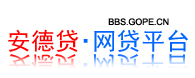
<style>
.page{position:relative;width:195px;height:78px;background:#ffffff}
.page>*{position:absolute;margin:0}
.t1{font:24px "SimHei";letter-spacing:0.02em;color:#0066ff}
.t2{font:24px "SimHei";letter-spacing:0.02em;color:#ff0000}
.t3{font:9px "ArialMT";letter-spacing:0.025em;color:#000000}
.t4{font:24px "SimHei";letter-spacing:0.02em}
</style>
<div class="page">
<p class="t1" style="left:8px;top:29px;width:180px;height:23px"><span class="t2">安德贷</span>·网贷平台</p>
<p class="t3" style="left:108px;top:18px;width:61px;height:8px">BBS.GOPE.CN</p>
<p class="t4" style="left:9px;top:54px;width:68px;height:23px">安德贷</p>
<p class="t4" style="left:83px;top:54px;width:105px;height:23px">·网贷平台</p>
</div>
